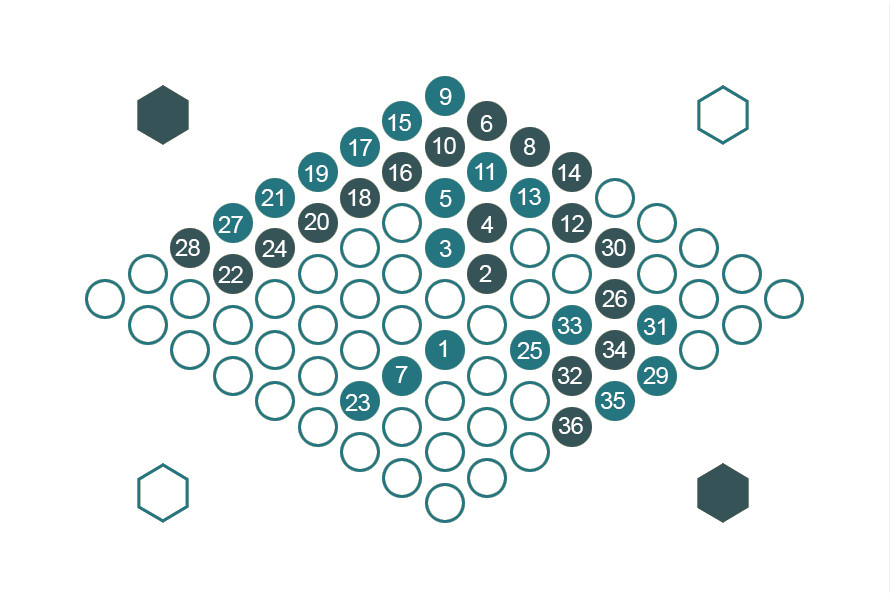
<style>
.page{position:relative;width:891px;height:599px;background:#ffffff}
.page>*{position:absolute;margin:0}
.t1{font:24px "ArialMT";letter-spacing:-0.025em;color:#ffffff}
</style>
<div class="page">
<p class="t1" style="left:439px;top:88px;width:13px;height:17px">9</p>
<p class="t1" style="left:388px;top:114px;width:23px;height:17px">15</p>
<p class="t1" style="left:480px;top:115px;width:13px;height:17px">6</p>
<p class="t1" style="left:433px;top:137px;width:23px;height:17px">10</p>
<p class="t1" style="left:349px;top:139px;width:23px;height:17px">17</p>
<p class="t1" style="left:524px;top:138px;width:12px;height:17px">8</p>
<p class="t1" style="left:305px;top:165px;width:23px;height:17px">19</p>
<p class="t1" style="left:389px;top:164px;width:23px;height:17px">16</p>
<p class="t1" style="left:475px;top:163px;width:19px;height:17px">11</p>
<p class="t1" style="left:558px;top:164px;width:23px;height:17px">14</p>
<p class="t1" style="left:261px;top:189px;width:22px;height:17px">21</p>
<p class="t1" style="left:348px;top:189px;width:23px;height:17px">18</p>
<p class="t1" style="left:440px;top:190px;width:12px;height:17px">5</p>
<p class="t1" style="left:518px;top:188px;width:23px;height:17px">13</p>
<p class="t1" style="left:218px;top:216px;width:25px;height:17px">27</p>
<p class="t1" style="left:304px;top:213px;width:25px;height:17px">20</p>
<p class="t1" style="left:481px;top:216px;width:13px;height:17px">4</p>
<p class="t1" style="left:561px;top:215px;width:23px;height:17px">12</p>
<p class="t1" style="left:175px;top:239px;width:25px;height:17px">28</p>
<p class="t1" style="left:262px;top:240px;width:25px;height:17px">24</p>
<p class="t1" style="left:440px;top:240px;width:12px;height:17px">3</p>
<p class="t1" style="left:602px;top:239px;width:24px;height:17px">30</p>
<p class="t1" style="left:218px;top:266px;width:25px;height:17px">22</p>
<p class="t1" style="left:479px;top:265px;width:13px;height:17px">2</p>
<p class="t1" style="left:602px;top:290px;width:25px;height:17px">26</p>
<p class="t1" style="left:558px;top:317px;width:24px;height:17px">33</p>
<p class="t1" style="left:644px;top:318px;width:21px;height:17px">31</p>
<p class="t1" style="left:439px;top:340px;width:8px;height:17px">1</p>
<p class="t1" style="left:517px;top:342px;width:25px;height:17px">25</p>
<p class="t1" style="left:603px;top:341px;width:24px;height:17px">34</p>
<p class="t1" style="left:395px;top:366px;width:13px;height:17px">7</p>
<p class="t1" style="left:558px;top:367px;width:24px;height:17px">32</p>
<p class="t1" style="left:643px;top:367px;width:25px;height:17px">29</p>
<p class="t1" style="left:345px;top:394px;width:25px;height:17px">23</p>
<p class="t1" style="left:601px;top:392px;width:24px;height:17px">35</p>
<p class="t1" style="left:559px;top:417px;width:24px;height:17px">36</p>
</div>
